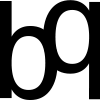
<style>
.page{position:relative;width:100px;height:100px;background:#ffffff}
.page>*{position:absolute;margin:0}
.t1{font:128px "DejaVuSansMono";color:#000000}
</style>
<div class="page">
<p class="t1" style="left:0px;top:1px;width:58px;height:99px">b</p>
<p class="t1" style="left:43px;top:0px;width:58px;height:100px;rotate:-180deg">b</p>
</div>
